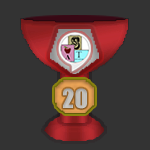
<style>
.page{position:relative;width:150px;height:150px;background:#333333}
.page>*{position:absolute;margin:0}
.t1{font:24.5px "Impact";color:#c0beb9}
</style>
<div class="page">
<p class="t1" style="left:63px;top:88px;width:24px;height:21px">20</p>
</div>
